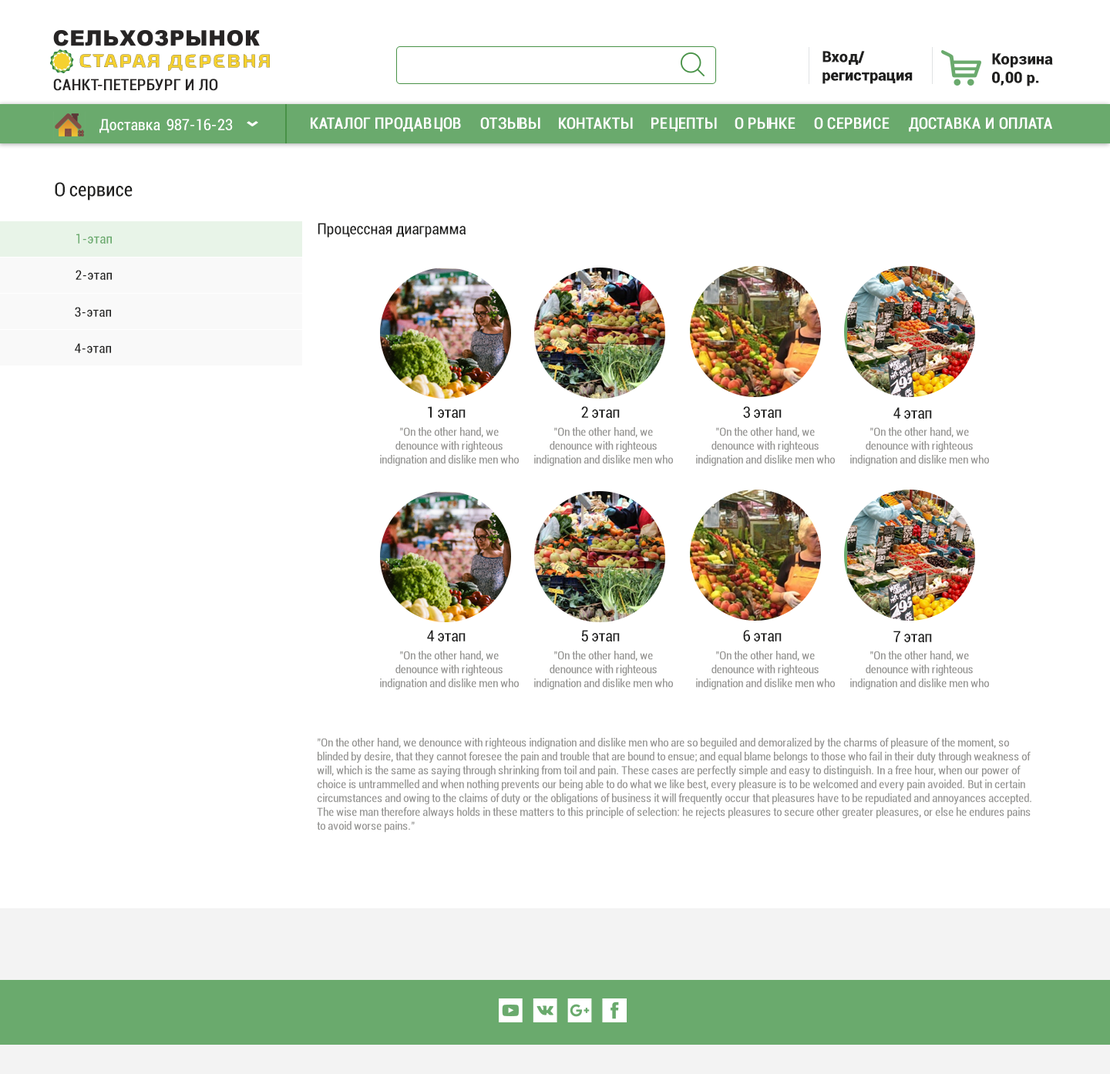
<style>
.page{position:relative;width:1110px;height:1074px;background:#ffffff}
.page>*{position:absolute;margin:0}
.t1{font:15.4px "Roboto-Black";color:#20201f}
.t2{font:15.4px "Roboto-Condensed";color:#272525;text-transform:uppercase;font-weight:bold}
.t3{font:15.4px "Roboto-Condensed";color:#ffffff}
.t4{font:15.4px "Roboto-Condensed";color:#ffffff;text-transform:uppercase;font-weight:bold}
.t5{font:19.3px "Roboto-Condensed";color:#20201f}
.t6{font:13.1px "Roboto-Condensed";color:#6aaa6d}
.t7{font:15.4px "Roboto-Condensed";color:#20201f}
.t8{font:13.1px "Roboto-Condensed";color:#20201f}
.t9{font:11.6px "Roboto-Condensed";color:#939290}
</style>
<div class="page">
<p class="t1" style="left:823px;top:51px;width:90px;height:33px">Вход/<br>регистрация</p>
<p class="t1" style="left:992px;top:53px;width:61px;height:33px">Корзина<br>0,00 р.</p>
<p class="t2" style="left:53px;top:79px;width:165px;height:12px">Санкт-Петербург и ЛО</p>
<p class="t3" style="left:99px;top:119px;width:61px;height:14px">Доставка</p>
<p class="t3" style="left:167px;top:119px;width:66px;height:11px">987-16-23</p>
<p class="t4" style="left:311px;top:117px;width:150px;height:15px">Каталог продавцов</p>
<p class="t4" style="left:480px;top:117px;width:60px;height:13px">Отзывы</p>
<p class="t4" style="left:559px;top:117px;width:74px;height:13px">Контакты</p>
<p class="t4" style="left:652px;top:117px;width:65px;height:15px">Рецепты</p>
<p class="t4" style="left:735px;top:117px;width:61px;height:13px">О рынке</p>
<p class="t4" style="left:814px;top:117px;width:76px;height:13px">О Сервисе</p>
<p class="t4" style="left:909px;top:117px;width:143px;height:15px">Доставка и оплата</p>
<p class="t5" style="left:55px;top:182px;width:78px;height:18px">О cервисе</p>
<p class="t6" style="left:76px;top:234px;width:36px;height:10px">1-этап</p>
<p class="t7" style="left:318px;top:223px;width:148px;height:14px">Процессная диаграмма</p>
<p class="t8" style="left:76px;top:270px;width:36px;height:10px">2-этап</p>
<p class="t8" style="left:75px;top:307px;width:36px;height:10px">3-этап</p>
<p class="t8" style="left:75px;top:343px;width:36px;height:10px">4-этап</p>
<p class="t7" style="left:428px;top:406px;width:38px;height:12px">1 этап</p>
<p class="t7" style="left:581px;top:406px;width:39px;height:12px">2 этап</p>
<p class="t7" style="left:743px;top:406px;width:39px;height:12px">3 этап</p>
<p class="t7" style="left:894px;top:407px;width:38px;height:12px">4 этап</p>
<p class="t9" style="left:380px;top:427px;width:139px;height:39px;text-align:center">"On the other hand, we denounce with righteous indignation and dislike men who</p>
<p class="t9" style="left:534px;top:427px;width:139px;height:39px;text-align:center">"On the other hand, we denounce with righteous indignation and dislike men who</p>
<p class="t9" style="left:696px;top:427px;width:139px;height:39px;text-align:center">"On the other hand, we denounce with righteous indignation and dislike men who</p>
<p class="t9" style="left:850px;top:427px;width:139px;height:39px;text-align:center">"On the other hand, we denounce with righteous indignation and dislike men who</p>
<p class="t7" style="left:427px;top:630px;width:39px;height:11px">4 этап</p>
<p class="t7" style="left:581px;top:630px;width:39px;height:11px">5 этап</p>
<p class="t7" style="left:743px;top:630px;width:39px;height:11px">6 этап</p>
<p class="t7" style="left:894px;top:631px;width:38px;height:11px">7 этап</p>
<p class="t9" style="left:380px;top:651px;width:139px;height:39px;text-align:center">"On the other hand, we denounce with righteous indignation and dislike men who</p>
<p class="t9" style="left:534px;top:651px;width:139px;height:39px;text-align:center">"On the other hand, we denounce with righteous indignation and dislike men who</p>
<p class="t9" style="left:696px;top:651px;width:139px;height:39px;text-align:center">"On the other hand, we denounce with righteous indignation and dislike men who</p>
<p class="t9" style="left:850px;top:651px;width:139px;height:39px;text-align:center">"On the other hand, we denounce with righteous indignation and dislike men who</p>
<p class="t9" style="left:317px;top:738px;width:715px;height:95px">"On the other hand, we denounce with righteous indignation and dislike men who are so beguiled and demoralized by the charms of pleasure of the moment, so blinded by desire, that they cannot foresee the pain and trouble that are bound to ensue; and equal blame belongs to those who fail in their duty through weakness of will, which is the same as saying through shrinking from toil and pain. These cases are perfectly simple and easy to distinguish. In a free hour, when our power of choice is untrammelled and when nothing prevents our being able to do what we like best, every pleasure is to be welcomed and every pain avoided. But in certain circumstances and owing to the claims of duty or the obligations of business it will frequently occur that pleasures have to be repudiated and annoyances accepted. The wise man therefore always holds in these matters to this principle of selection: he rejects pleasures to secure other greater pleasures, or else he endures pains to avoid worse pains."</p>
</div>
